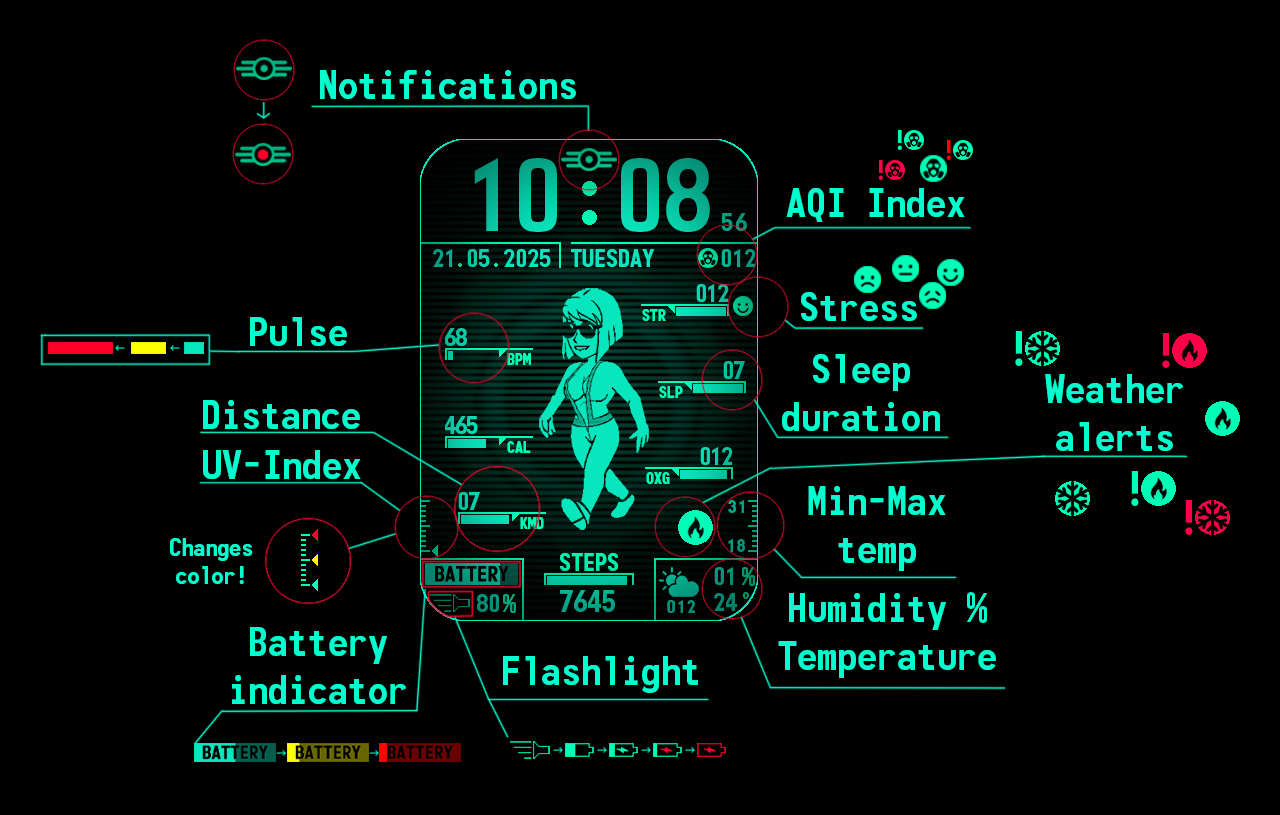
<style>
.page{position:relative;width:1280px;height:815px;background:#000000}
.page>*{position:absolute;margin:0}
.t1{font:40px "Monofonto-Regular";color:#01fecf}
.t2{font:24px "Monofonto-Regular";color:#01fecf}
</style>
<div class="page">
<p class="t1" style="left:320px;top:70px;width:256px;height:29px">Notifications</p>
<p class="t1" style="left:786px;top:188px;width:179px;height:34px">AQI Index</p>
<p class="t1" style="left:801px;top:292px;width:116px;height:29px">Stress</p>
<p class="t1" style="left:250px;top:317px;width:97px;height:29px">Pulse</p>
<p class="t1" style="left:782px;top:354px;width:158px;height:77px;text-align:center">Sleep<br>duration</p>
<p class="t1" style="left:1045px;top:374px;width:138px;height:77px;text-align:center">Weather<br>alerts</p>
<p class="t1" style="left:203px;top:400px;width:157px;height:29px">Distance</p>
<p class="t1" style="left:203px;top:450px;width:158px;height:29px">UV-Index</p>
<p class="t1" style="left:808px;top:486px;width:138px;height:85px;text-align:center">Min-Max<br>temp</p>
<p class="t2" style="left:170px;top:538px;width:83px;height:46px;text-align:center">Changes color!</p>
<p class="t1" style="left:778px;top:592px;width:218px;height:86px;text-align:center">Humidity %<br>Temperature</p>
<p class="t1" style="left:232px;top:627px;width:174px;height:77px;text-align:center">Battery indicator</p>
<p class="t1" style="left:503px;top:656px;width:195px;height:37px">Flashlight</p>
</div>
